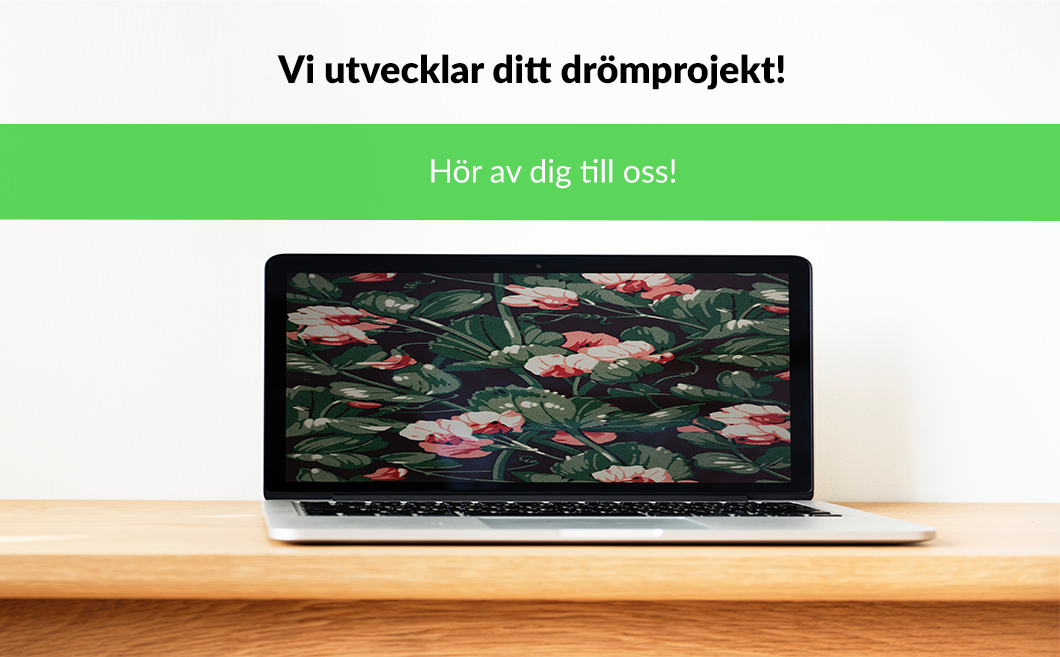
<style>
.page{position:relative;width:1060px;height:657px}
.page>*{position:absolute;margin:0}
.t1{font:38px "Lato-Black";color:#000000}
.t2{font:32px "Lato-Regular";color:#ffffff}
</style>
<div class="page">
<p class="t1" style="left:277px;top:54px;width:507px;height:36px">Vi utvecklar ditt drömprojekt!</p>
<p class="t2" style="left:431px;top:159px;width:244px;height:30px">Hör av dig till oss!</p>
</div>
